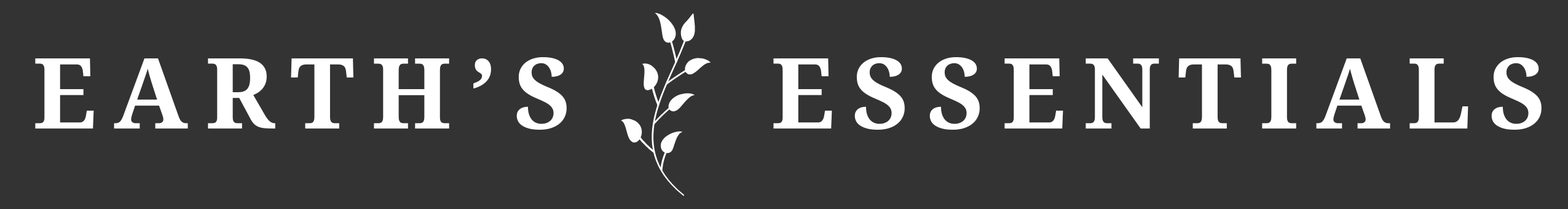
<style>
.page{position:relative;width:1568px;height:209px;background:#333333}
.page>*{position:absolute;margin:0}
.t1{font:98.3px "NotoSerif-Bold";letter-spacing:0.175em;color:#ffffff}
</style>
<div class="page">
<p class="t1" style="left:35px;top:57px;width:532px;height:73px">EARTH’S</p>
<p class="t1" style="left:773px;top:57px;width:769px;height:73px">ESSENTIALS</p>
</div>
